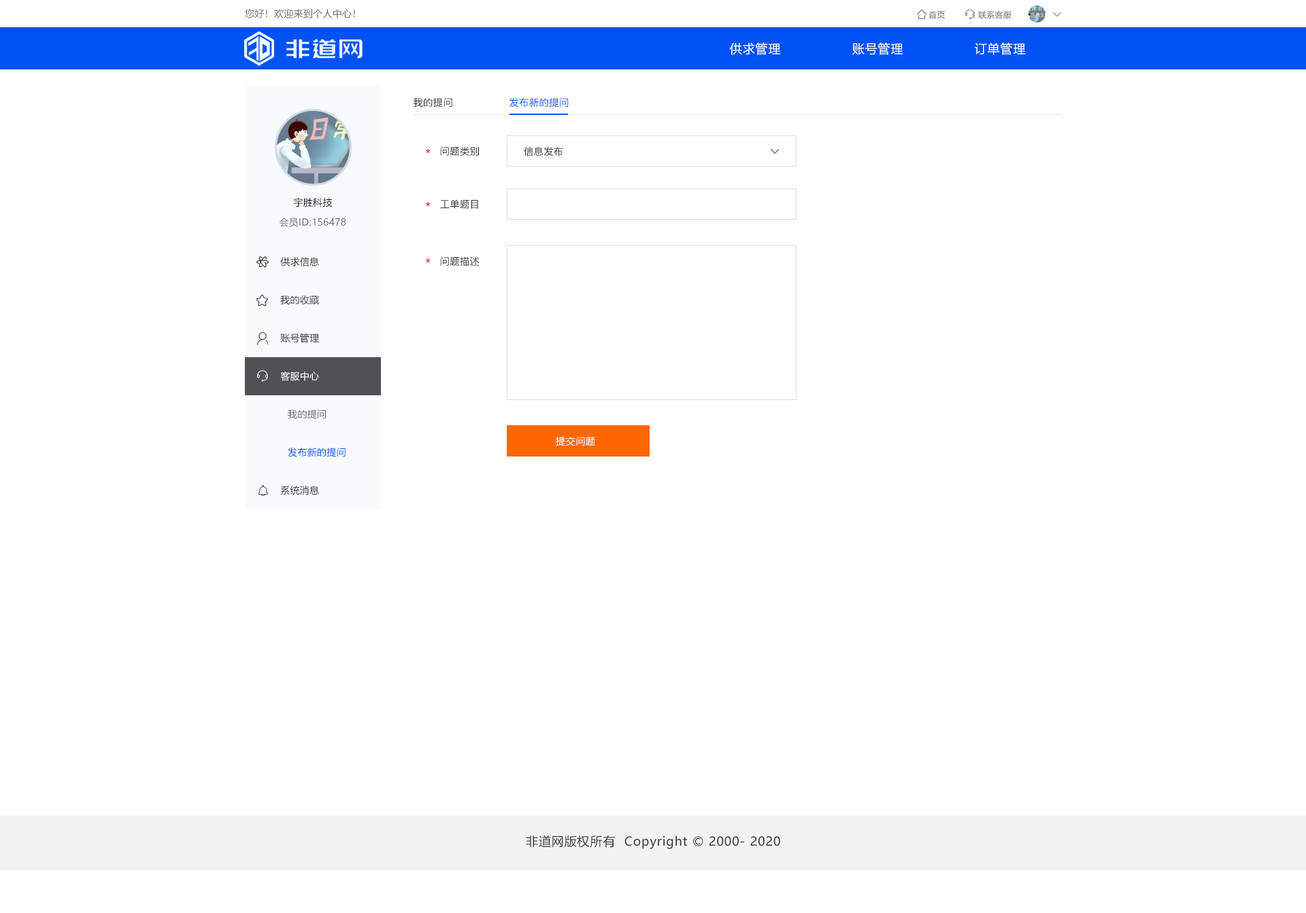
<style>
.page{position:relative;width:1306px;height:913px;background:#ffffff}
.page>*{position:absolute;margin:0}
.t1{font:9.5px "MicrosoftYaHei";letter-spacing:0.022em;color:#666666}
.t2{font:8.2px "MicrosoftYaHei";letter-spacing:0.022em;color:#666666}
.t3{font:12.2px "MicrosoftYaHei";letter-spacing:0.05em;color:#ffffff}
.t4{font:9.5px "MicrosoftYaHei";letter-spacing:0.05em;color:#333333}
.t5{font:9.5px "MicrosoftYaHei";letter-spacing:0.05em;color:#0152f5}
.t6{font:9.5px "MicrosoftYaHei";letter-spacing:0.022em;color:#141414}
.t7{font:9.5px "MicrosoftYaHei";letter-spacing:0.022em;color:#333333}
.t8{font:9.5px "MicrosoftYaHei";letter-spacing:0.022em;color:#ffffff}
.t9{font:9.5px "MicrosoftYaHei";letter-spacing:0.05em;color:#fefefe}
.t10{font:9.5px "MicrosoftYaHei";letter-spacing:0.022em;color:#0152f5}
.t11{font:12.2px "MicrosoftYaHei";letter-spacing:0.05em;color:#333333}
</style>
<div class="page">
<p class="t1" style="left:245px;top:9px;width:110px;height:9px">您好！欢迎来到个人中心！</p>
<p class="t2" style="left:929px;top:11px;width:16px;height:8px">首页</p>
<p class="t2" style="left:978px;top:11px;width:34px;height:8px">联系客服</p>
<p class="t3" style="left:729px;top:42px;width:52px;height:13px">供求管理</p>
<p class="t3" style="left:852px;top:42px;width:51px;height:13px">账号管理</p>
<p class="t3" style="left:974px;top:42px;width:52px;height:13px">订单管理</p>
<p class="t4" style="left:413px;top:97px;width:39px;height:10px">我的提问</p>
<p class="t5" style="left:510px;top:97px;width:59px;height:10px">发布新的提问</p>
<p class="t4" style="left:440px;top:146px;width:39px;height:10px">问题类别</p>
<p class="t4" style="left:524px;top:146px;width:39px;height:10px">信息发布</p>
<p class="t6" style="left:293px;top:197px;width:40px;height:10px">宇胜科技</p>
<p class="t4" style="left:440px;top:199px;width:38px;height:10px">工单题目</p>
<p class="t1" style="left:280px;top:218px;width:66px;height:9px">会员ID:156478</p>
<p class="t7" style="left:280px;top:257px;width:39px;height:10px">供求信息</p>
<p class="t4" style="left:440px;top:256px;width:40px;height:10px">问题描述</p>
<p class="t7" style="left:280px;top:295px;width:39px;height:10px">我的收藏</p>
<p class="t7" style="left:280px;top:333px;width:39px;height:10px">账号管理</p>
<p class="t8" style="left:280px;top:371px;width:39px;height:10px">客服中心</p>
<p class="t1" style="left:288px;top:410px;width:38px;height:9px">我的提问</p>
<p class="t9" style="left:556px;top:436px;width:39px;height:10px">提交问题</p>
<p class="t10" style="left:288px;top:448px;width:58px;height:9px">发布新的提问</p>
<p class="t7" style="left:280px;top:486px;width:39px;height:9px">系统消息</p>
<p class="t11" style="left:526px;top:835px;width:254px;height:14px">非道网版权所有  Copyright © 2000- 2020</p>
</div>
